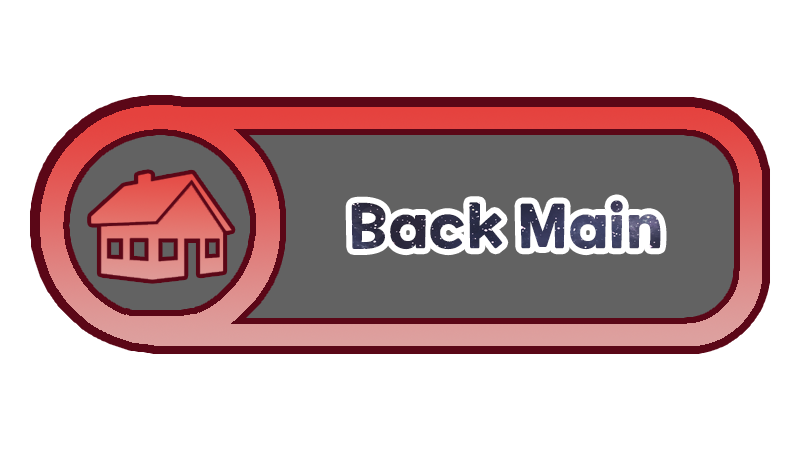
<style>
.page{position:relative;width:800px;height:450px;background:#ffffff}
.page>*{position:absolute;margin:0}
.t1{font:60px "ONEMobilePOPOTFRegular"}
</style>
<div class="page">
<p class="t1" style="left:351px;top:200px;width:310px;height:50px">Back Main</p>
</div>
